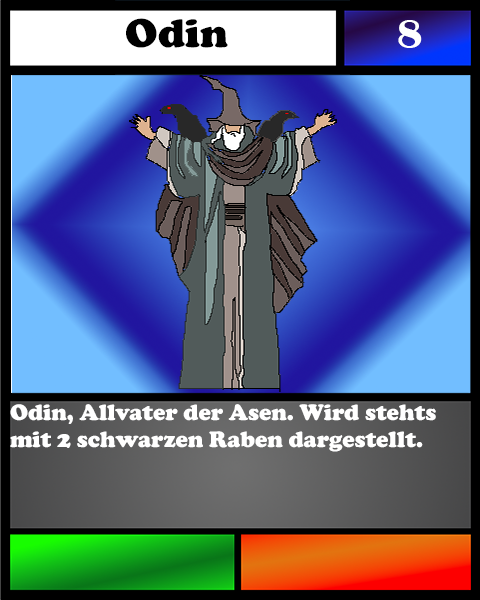
<style>
.page{position:relative;width:480px;height:600px}
.page>*{position:absolute;margin:0}
.t1{font:41.7px "CooperBlack";color:#000000}
.t2{font:41.7px "BritannicBold";color:#ffffff}
.t3{font:23.1px "CooperBlack";color:#ffffff}
</style>
<div class="page">
<p class="t1" style="left:126px;top:18px;width:102px;height:30px">Odin</p>
<p class="t2" style="left:398px;top:20px;width:24px;height:28px">8</p>
<p class="t3" style="left:10px;top:404px;width:426px;height:48px">Odin, Allvater der Asen. Wird stehts <br>mit 2 schwarzen Raben dargestellt.</p>
</div>
